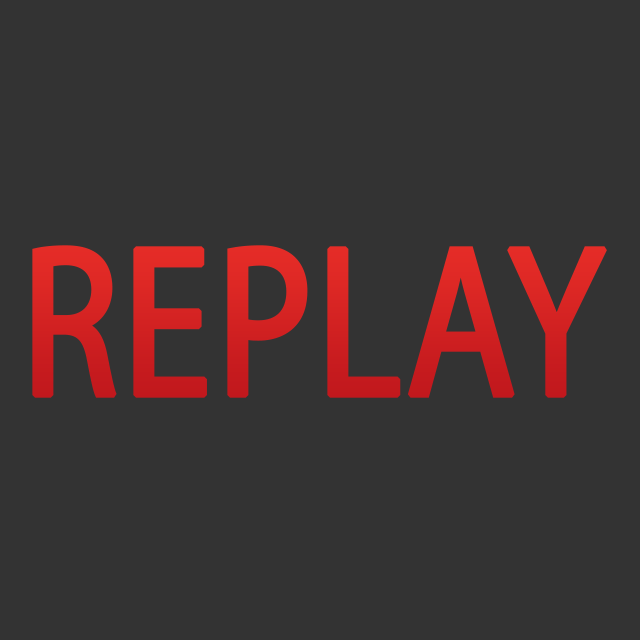
<style>
.page{position:relative;width:640px;height:640px;background:#333333}
.page>*{position:absolute;margin:0}
.t1{font:216px "MyriadPro-Regular";color:#d42222;font-weight:bold;scale:0.83 1}
</style>
<div class="page">
<p class="t1" style="left:32px;top:245px;width:575px;height:153px">REPLAY</p>
</div>
